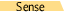
<style>
.page{position:relative;width:64px;height:12px;background:#ffdd88}
.page>*{position:absolute;margin:0}
.t1{font:13.2px "Amira-Light";letter-spacing:-0.01em;color:#000000;scale:0.91 1}
</style>
<div class="page">
<p class="t1" style="left:16px;top:2px;width:29px;height:10px">Sense</p>
</div>
